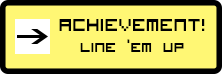
<style>
.page{position:relative;width:222px;height:74px;background:#fff774}
.page>*{position:absolute;margin:0}
.t1{font:23px "VisitorTT1BRK";color:#000000}
.t2{font:18px "VisitorTT1BRK";color:#000000}
</style>
<div class="page">
<p class="t1" style="left:59px;top:19px;width:146px;height:33px;text-align:center">achievement!<br><span class="t2">Line ‘em up</span></p>
</div>
